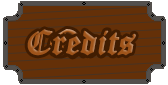
<style>
.page{position:relative;width:168px;height:85px;background:#643008}
.page>*{position:absolute;margin:0}
.t1{font:34px "OldEnglishTextMT";letter-spacing:0.005em;color:#9f541a;font-weight:bold;font-style:italic}
</style>
<div class="page">
<p class="t1" style="left:27px;top:29px;width:109px;height:27px">Credits</p>
</div>
